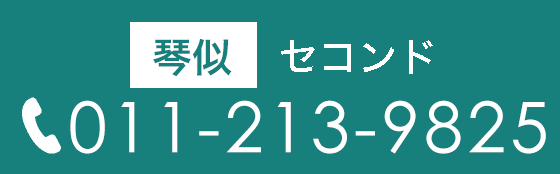
<style>
.page{position:relative;width:560px;height:174px;background:#17807c}
.page>*{position:absolute;margin:0}
.t1{font:40px "HiraKakuStd-W6";color:#17807c}
.t2{font:40px "HiraKakuStd-W5";color:#ffffff}
.t3{font:70px "CenturyGothic";letter-spacing:0.06em;color:#ffffff}
</style>
<div class="page">
<p class="t1" style="left:153px;top:38px;width:79px;height:39px">琴似</p>
<p class="t2" style="left:281px;top:40px;width:152px;height:34px">セコンド</p>
<p class="t3" style="left:70px;top:100px;width:476px;height:54px">011-213-9825</p>
</div>
